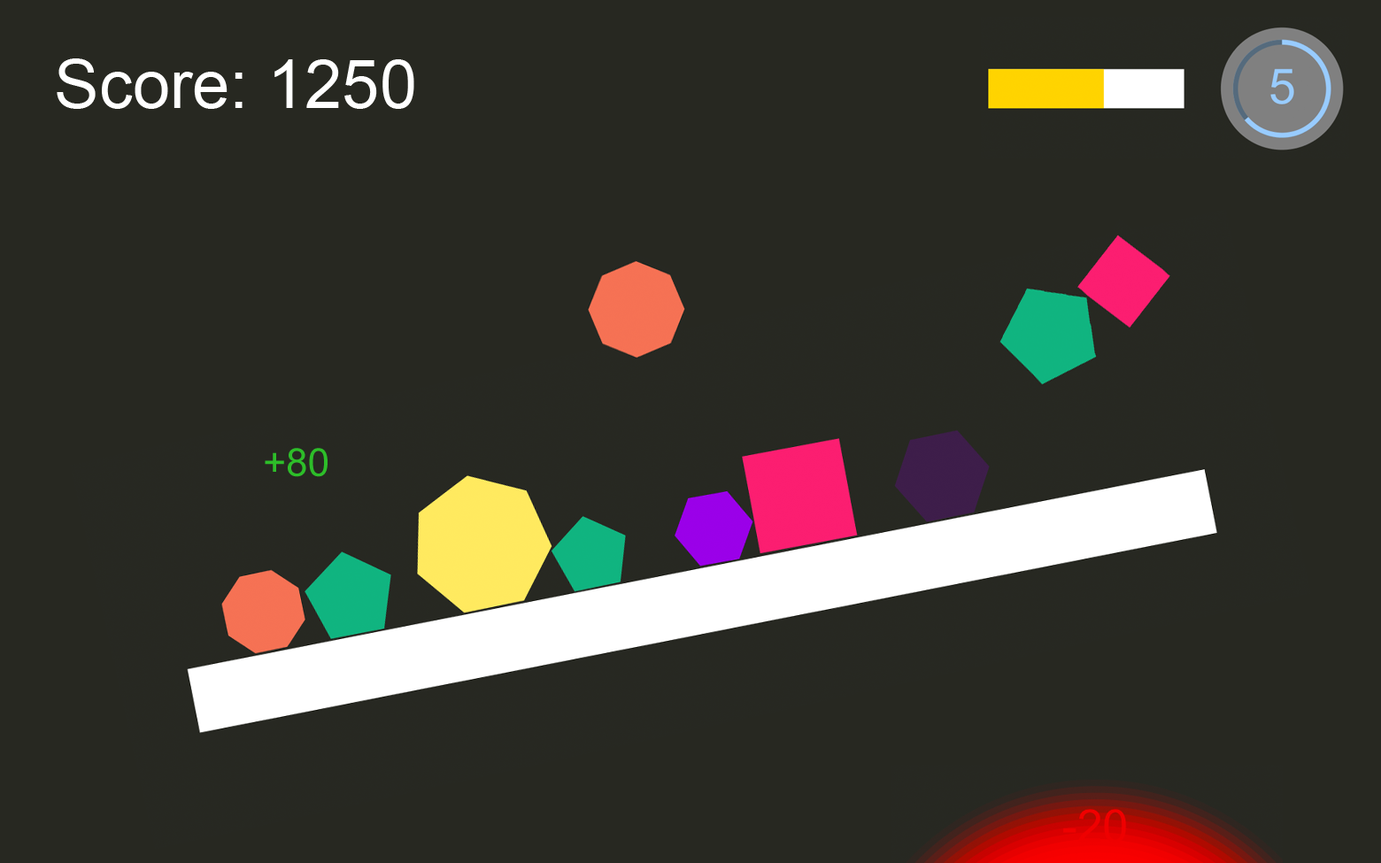
<style>
.page{position:relative;width:1381px;height:863px;background:#272821}
.page>*{position:absolute;margin:0}
.t1{font:67.3px "ArialMT";color:#ffffff}
.t2{font:39px "ArialMT";color:#2dbe29;text-transform:uppercase}
</style>
<div class="page">
<p class="t1" style="left:57px;top:58px;width:357px;height:51px">Score: 1250</p>
<p class="t2" style="left:265px;top:448px;width:63px;height:29px">+80</p>
</div>
